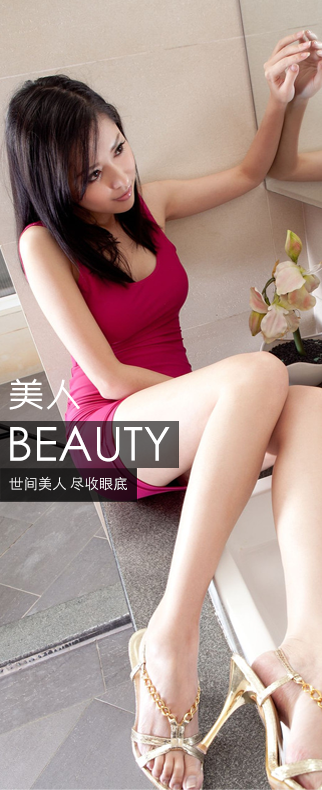
<style>
.page{position:relative;width:322px;height:790px}
.page>*{position:absolute;margin:0}
.t1{font:33.9px "RTWSYueGoTrial-Regular";letter-spacing:0.02em;color:#ffffff;scale:1.08 1}
.t2{font:46.9px "STXihei";color:#ffffff}
.t3{font:14.4px "STXihei";color:#ffffff}
</style>
<div class="page">
<p class="t1" style="left:9px;top:378px;width:71px;height:32px">美人</p>
<p class="t2" style="left:10px;top:425px;width:160px;height:37px">BEAUTY</p>
<p class="t3" style="left:9px;top:476px;width:118px;height:15px">世间美人 尽收眼底</p>
</div>
